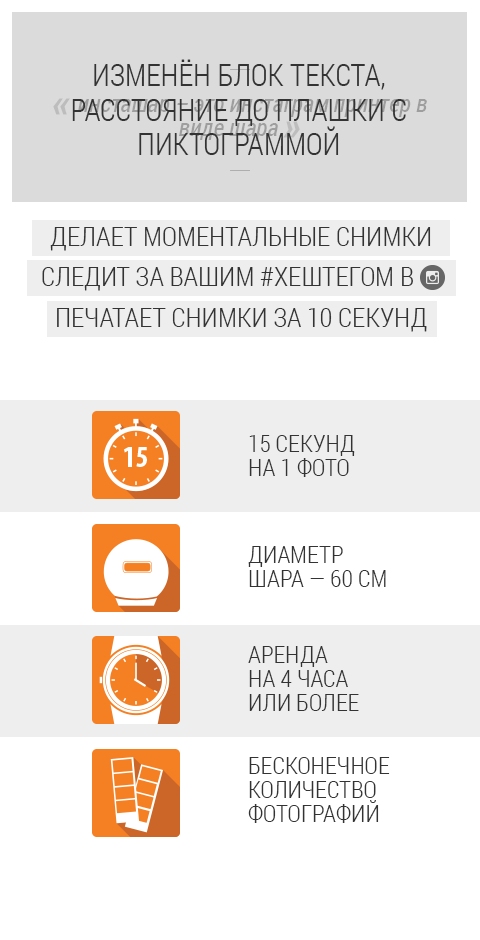
<style>
.page{position:relative;width:480px;height:940px;background:#ffffff}
.page>*{position:absolute;margin:0}
.t1{font:30px/34.6px "RobotoCondensed-Light";color:#333333;text-transform:uppercase}
.t2{font:24px "RobotoCondensed-Italic";color:#333333}
.t3{font:40px "RobotoCondensed-BoldItalic";color:#999999}
.t4{font:27px/40.5px "RobotoCondensed-Light";color:#333333;text-transform:uppercase}
.t5{font:24px/24px "RobotoCondensed-Light";color:#333333;text-transform:uppercase}
</style>
<div class="page">
<p class="t1" style="left:72px;top:59px;width:334px;height:96px;text-align:center">изменён блок текста, расстояние до плашки с пиктограммой</p>
<p class="t2" style="left:53px;top:98px;width:374px;height:43px"><span class="t3">« </span>инсташар – это инстаграм принтер в виде шара <span class="t3">»</span></p>
<p class="t4" style="left:42px;top:227px;width:389px;height:105px;text-align:center">ДЕЛАЕТ МОМЕНТАЛЬНЫЕ СНИМКИ<br>СЛЕДИТ ЗА ВАШИМ #ХЕШТЕГОМ В ПЕЧАТАЕТ СНИМКИ ЗА 10 СЕКУНД</p>
<p class="t5" style="left:249px;top:435px;width:106px;height:42px">15 секунд<br>на 1 фото</p>
<p class="t5" style="left:248px;top:546px;width:138px;height:41px">диаметр<br>шара — 60 см</p>
<p class="t5" style="left:248px;top:646px;width:111px;height:65px">аренда<br>на 4 часа<br>или более</p>
<p class="t5" style="left:248px;top:757px;width:142px;height:66px">бесконечное количество фотографий</p>
</div>
